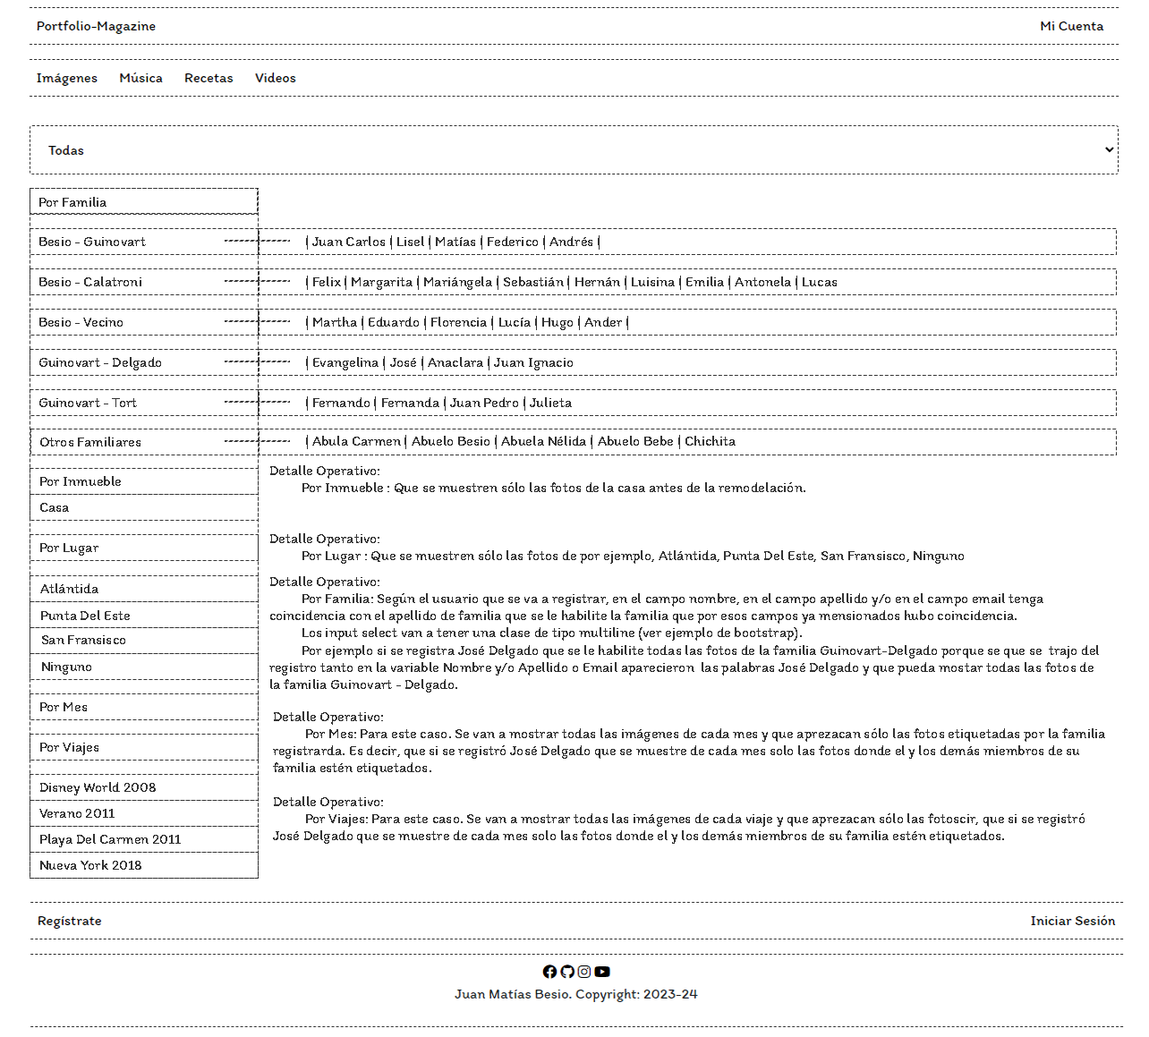
<style>
.page{position:relative;width:1149px;height:1037px;background:#ffffff}
.page>*{position:absolute;margin:0}
.t1{font:14.3px "Itim-Regular";color:#333333}
</style>
<div class="page">
<p class="t1" style="left:39px;top:197px;width:68px;height:10px">Por Familia</p>
<p class="t1" style="left:39px;top:237px;width:107px;height:9px">Besio - Guinovart</p>
<p class="t1" style="left:306px;top:235px;width:294px;height:15px">| Juan Carlos | Lisel | Matías | Federico | Andrés |</p>
<p class="t1" style="left:39px;top:277px;width:102px;height:9px">Besio - Calatroni</p>
<p class="t1" style="left:306px;top:276px;width:531px;height:14px">| Felix | Margarita | Mariángela | Sebastián | Hernán | Luisina | Emilia | Antonela | Lucas</p>
<p class="t1" style="left:39px;top:318px;width:84px;height:9px">Besio - Vecino</p>
<p class="t1" style="left:306px;top:316px;width:322px;height:14px">| Martha | Eduardo | Florencia | Lucía | Hugo | Ander |</p>
<p class="t1" style="left:39px;top:357px;width:122px;height:14px">Guinovart - Delgado</p>
<p class="t1" style="left:306px;top:356px;width:267px;height:15px">| Evangelina | José | Anaclara | Juan Ignacio</p>
<p class="t1" style="left:39px;top:398px;width:98px;height:9px">Guinovart - Tort</p>
<p class="t1" style="left:306px;top:397px;width:266px;height:14px">| Fernando | Fernanda | Juan Pedro | Julieta</p>
<p class="t1" style="left:40px;top:437px;width:101px;height:10px">Otros Familiares</p>
<p class="t1" style="left:306px;top:435px;width:430px;height:14px">| Abula Carmen | Abuelo Besio | Abuela Nélida | Abuelo Bebe | Chichita</p>
<p class="t1" style="left:270px;top:465px;width:536px;height:29px">Detalle Operativo:  <br> Por Inmueble : Que se muestren sólo las fotos de la casa antes de la remodelación.</p>
<p class="t1" style="left:40px;top:476px;width:81px;height:10px">Por Inmueble</p>
<p class="t1" style="left:40px;top:503px;width:29px;height:9px">Casa</p>
<p class="t1" style="left:270px;top:534px;width:694px;height:30px">Detalle Operativo:  <br> Por Lugar : Que se muestren sólo las fotos de por ejemplo, Atlántida, Punta Del Este, San Fransisco, Ninguno</p>
<p class="t1" style="left:40px;top:543px;width:58px;height:13px">Por Lugar</p>
<p class="t1" style="left:269px;top:576px;width:830px;height:117px">Detalle Operativo:  <br> Por Familia: Según el usuario que se va a registrar, en el campo nombre, en el campo apellido y/o en el campo email tenga coincidencia con el apellido de familia que se le habilite la familia que por esos campos ya mensionados hubo coincidencia.<br> Los input select van a tener una clase de tipo multiline (ver ejemplo de bootstrap).<br> Por ejemplo si se registra José Delgado que se le habilite todas las fotos de la familia Guinovart-Delgado porque se que se  trajo del registro tanto en la variable Nombre y/o Apellido o Email aparecieron  las palabras José Delgado y que pueda mostar todas las fotos de la familia Guinovart - Delgado.</p>
<p class="t1" style="left:40px;top:584px;width:58px;height:9px">Atlántida</p>
<p class="t1" style="left:41px;top:610px;width:89px;height:10px">Punta Del Este</p>
<p class="t1" style="left:42px;top:636px;width:83px;height:9px">San Fransisco</p>
<p class="t1" style="left:42px;top:662px;width:49px;height:13px">Ninguno</p>
<p class="t1" style="left:40px;top:703px;width:47px;height:9px">Por Mes</p>
<p class="t1" style="left:273px;top:712px;width:833px;height:64px">Detalle Operativo:  <br> Por Mes: Para este caso. Se van a mostrar todas las imágenes de cada mes y que aprezacan sólo las fotos etiquetadas por la familia registrarda. Es decir, que si se registró José Delgado que se muestre de cada mes solo las fotos donde el y los demás miembros de su familia estén etiquetados.</p>
<p class="t1" style="left:40px;top:743px;width:58px;height:13px">Por Viajes</p>
<p class="t1" style="left:40px;top:782px;width:116px;height:14px">Disney World 2008</p>
<p class="t1" style="left:273px;top:797px;width:812px;height:47px">Detalle Operativo:  <br> Por Viajes: Para este caso. Se van a mostrar todas las imágenes de cada viaje y que aprezacan sólo las fotoscir, que si se registró José Delgado que se muestre de cada mes solo las fotos donde el y los demás miembros de su familia estén etiquetados.</p>
<p class="t1" style="left:39px;top:809px;width:76px;height:9px">Verano 2011</p>
<p class="t1" style="left:40px;top:834px;width:141px;height:14px">Playa Del Carmen 2011</p>
<p class="t1" style="left:40px;top:860px;width:101px;height:10px">Nueva York 2018</p>
</div>
